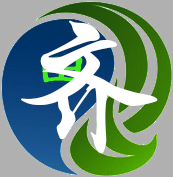
<style>
.page{position:relative;width:173px;height:177px;background:#b0b0b0}
.page>*{position:absolute;margin:0}
.t1{font:144.2px "STXingkai";color:#ffffff;scale:1.08 1}
</style>
<div class="page">
<p class="t1" style="left:21px;top:20px;width:137px;height:134px">齐</p>
</div>
